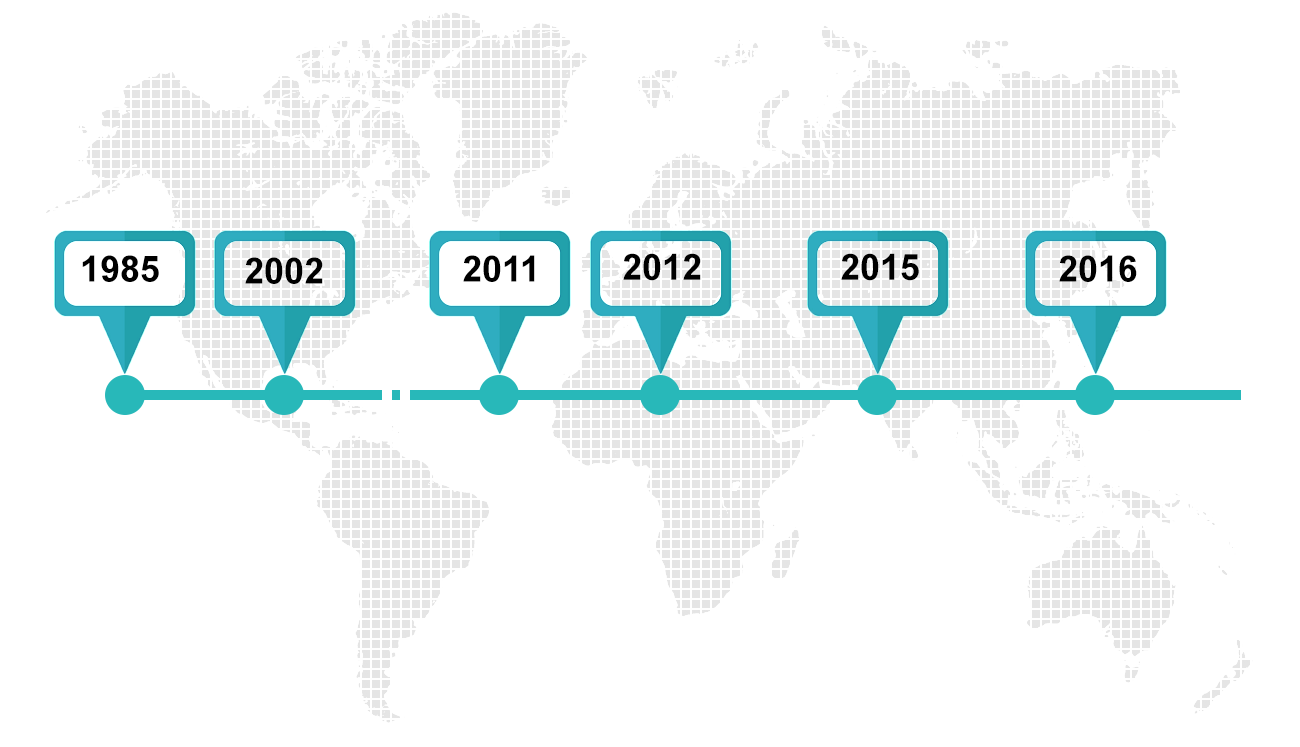
<style>
.page{position:relative;width:1300px;height:747px;background:#ffffff}
.page>*{position:absolute;margin:0}
.t1{font:36px "Arial-BoldMT";color:#000000}
</style>
<div class="page">
<p class="t1" style="left:82px;top:255px;width:77px;height:27px">1985</p>
<p class="t1" style="left:245px;top:257px;width:78px;height:27px">2002</p>
<p class="t1" style="left:463px;top:255px;width:72px;height:27px">2011</p>
<p class="t1" style="left:623px;top:253px;width:78px;height:28px">2012</p>
<p class="t1" style="left:841px;top:253px;width:78px;height:28px">2015</p>
<p class="t1" style="left:1059px;top:255px;width:78px;height:27px">2016</p>
</div>
